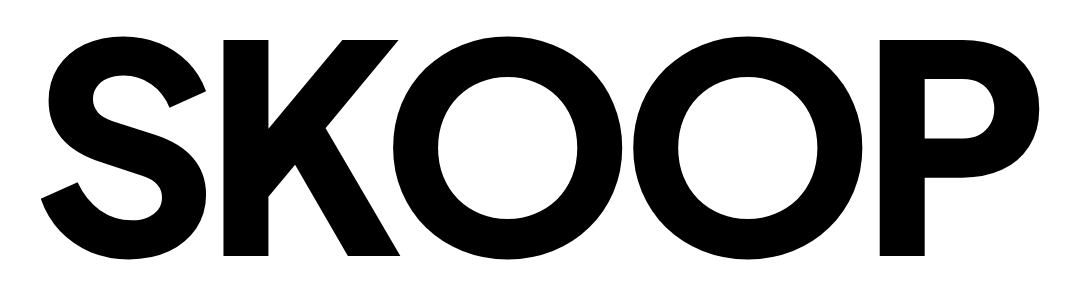
<style>
.page{position:relative;width:1080px;height:284px;background:#ffffff}
.page>*{position:absolute;margin:0}
.t1{font:290px "PlusJakartaSans-ExtraBold";letter-spacing:-0.05em;color:#000000}
</style>
<div class="page">
<p class="t1" style="left:40px;top:36px;width:1000px;height:224px">SKOOP</p>
</div>
